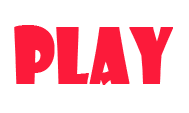
<style>
.page{position:relative;width:189px;height:113px;background:#ffffff}
.page>*{position:absolute;margin:0}
.t1{font:73.6px "ShowcardGothic-Reg";color:#fc1a3a;font-weight:bold;scale:0.83 1}
</style>
<div class="page">
<p class="t1" style="left:14px;top:25px;width:159px;height:60px">PlAY</p>
</div>
